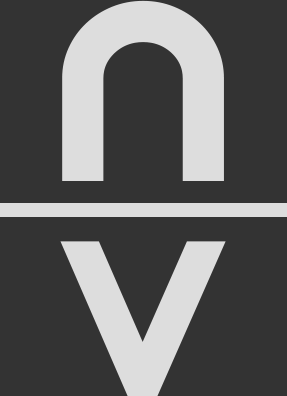
<style>
.page{position:relative;width:287px;height:396px;background:#333333}
.page>*{position:absolute;margin:0}
.t1{font:310.8px "ZilapMinimalist";letter-spacing:0.04em;color:#dddddd}
.t2{font:266.5px "ZilapMinimalist";letter-spacing:0.04em;color:#dddddd}
</style>
<div class="page">
<p class="t1" style="left:62px;top:0px;width:162px;height:181px">n</p>
<p class="t2" style="left:60px;top:241px;width:166px;height:155px">v</p>
</div>
